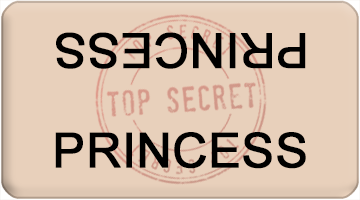
<style>
.page{position:relative;width:360px;height:200px;background:#e8d0bb}
.page>*{position:absolute;margin:0}
.t1{font:48px "ArialMT";color:#000000;font-weight:bold}
</style>
<div class="page">
<p class="t1" style="left:56px;top:32px;width:250px;height:37px;rotate:180deg">PRINCESS</p>
<p class="t1" style="left:55px;top:132px;width:251px;height:37px">PRINCESS</p>
</div>
